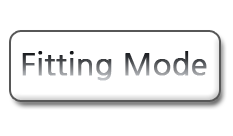
<style>
.page{position:relative;width:233px;height:136px;background:#ffffff}
.page>*{position:absolute;margin:0}
.t1{font:30px "NanumGothic";font-weight:bold}
</style>
<div class="page">
<p class="t1" style="left:22px;top:51px;width:185px;height:30px">Fitting Mode</p>
</div>
